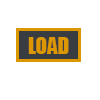
<style>
.page{position:relative;width:100px;height:100px;background:#ffffff}
.page>*{position:absolute;margin:0}
.t1{font:20.8px "Impact";color:#db9600}
</style>
<div class="page">
<p class="t1" style="left:28px;top:37px;width:41px;height:17px">LOAD</p>
</div>
